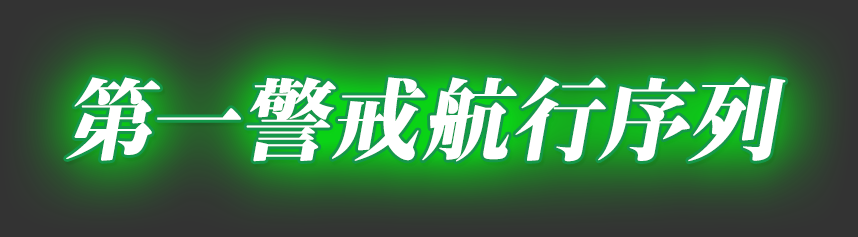
<style>
.page{position:relative;width:858px;height:237px}
.page>*{position:absolute;margin:0}
.t1{font:89px "KochoStd-Heavy";letter-spacing:0.02em;color:#ffffff;font-weight:bold;font-style:italic}
</style>
<div class="page">
<p class="t1" style="left:66px;top:77px;width:720px;height:85px">第一警戒航行序列</p>
</div>
